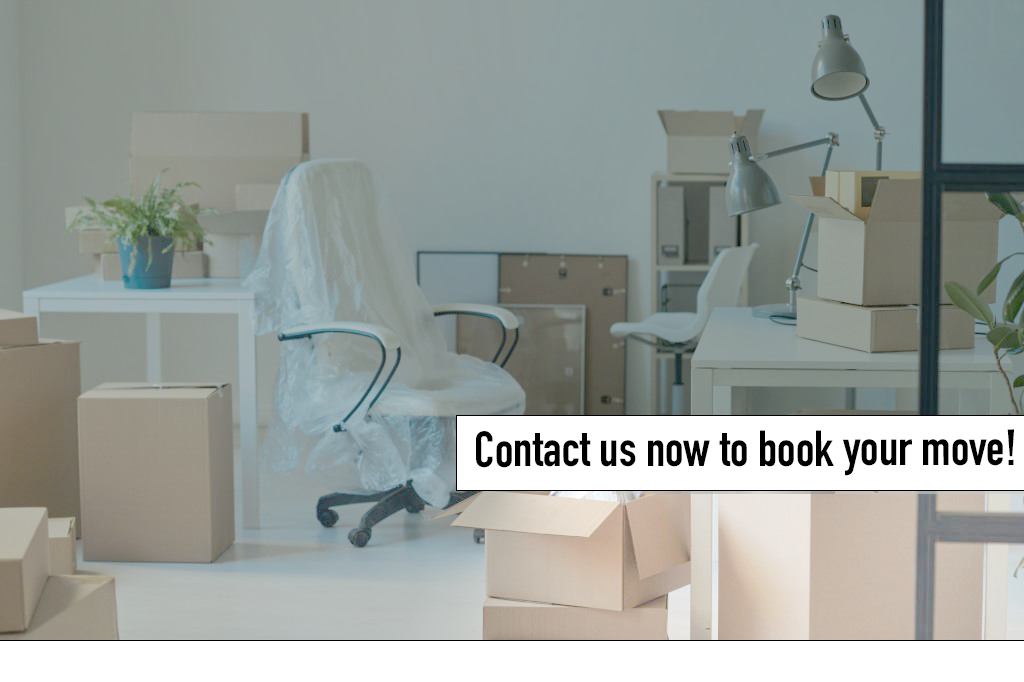
<style>
.page{position:relative;width:1024px;height:682px}
.page>*{position:absolute;margin:0}
.t1{font:50px "DINCondensed-Bold";color:#000000}
</style>
<div class="page">
<p class="t1" style="left:476px;top:429px;width:538px;height:47px">Contact us now to book your move!</p>
</div>
